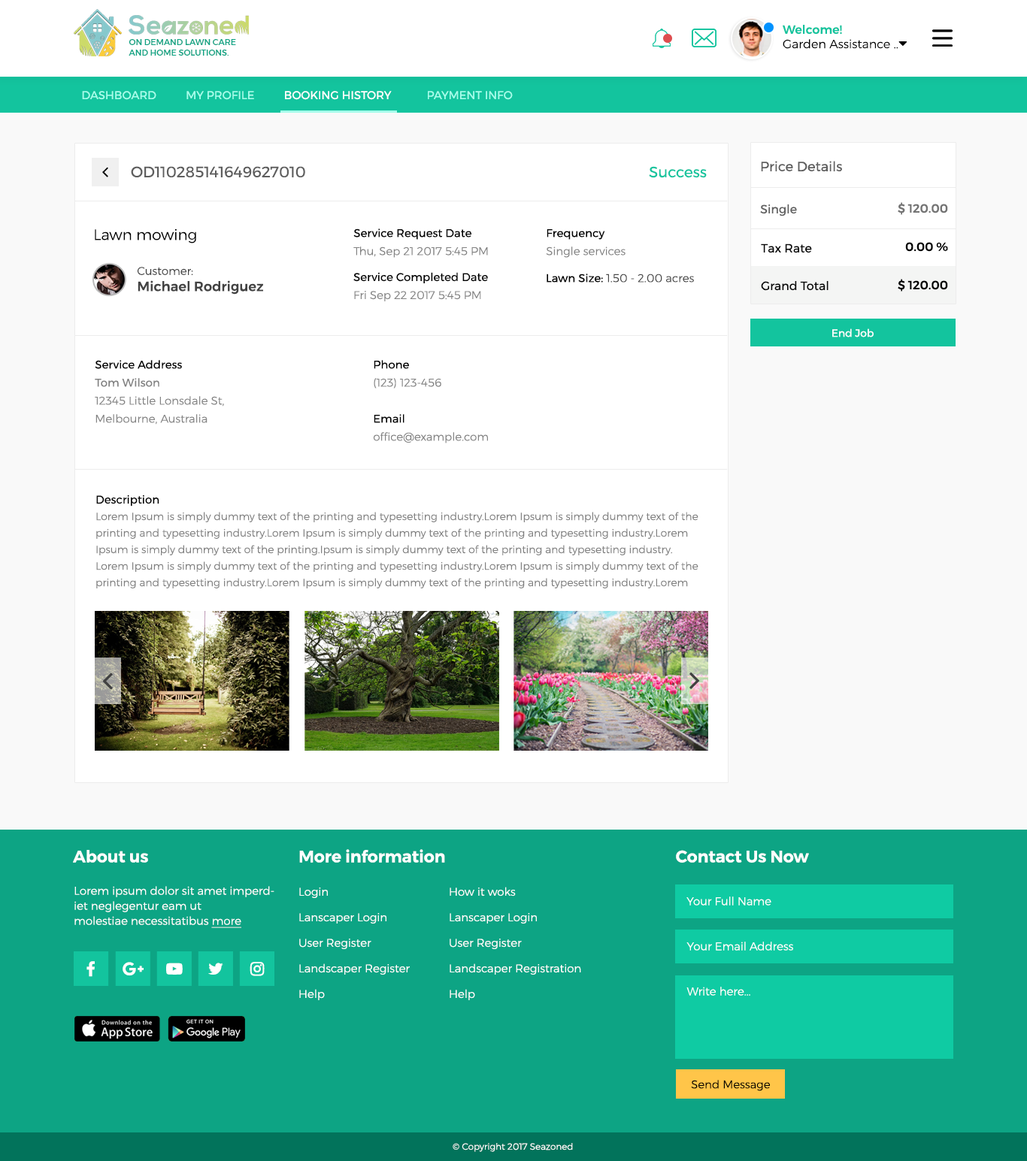
<style>
.page{position:relative;width:1027px;height:1161px;background:#ffffff}
.page>*{position:absolute;margin:0}
.t1{font:12px "Montserrat-Light";color:#000000}
.t2{font:12px "Montserrat-Medium";color:#13c49e}
.t3{font:8.3px "Montserrat-Medium";color:#0da484;text-transform:uppercase}
.t4{font:11.3px "Montserrat-Regular";color:#a6feeb;text-transform:uppercase}
.t5{font:11.3px "Montserrat-Regular";color:#ffffff;text-transform:uppercase}
.t6{font:13.5px "Montserrat-Regular";color:#5e5e5e}
.t7{font:15px "Montserrat-Regular";color:#5e5e5e}
.t8{font:15px "Montserrat-Regular";color:#14c49e}
.t9{font:12px "Montserrat-Regular";color:#5e5e5e}
.t10{font:12px "Montserrat-Medium";color:#747474}
.t11{font:15px "Montserrat-Light";color:#000000}
.t12{font:11.3px/18px "Montserrat-Light";color:#838383}
.t13{font:11.3px/18px "Montserrat-Regular";color:#000000}
.t14{font:12px "Montserrat-Regular";color:#060606}
.t15{font:12px "Montserrat-Medium";color:#000000}
.t16{font:13.5px "Montserrat-Medium";color:#434343}
.t17{font:11.3px "Montserrat-Light";color:#434343}
.t18{font:2.4px "Montserrat-Light";color:#ffffff}
.t19{font:11.3px "Montserrat-Light";color:#474747}
.t20{font:11.3px "Montserrat-Regular";color:#000000}
.t21{font:10.5px "Montserrat-Regular";color:#ffffff}
.t22{font:11.3px/18px "Montserrat-Regular";color:#828282}
.t23{font:10.5px/16.5px "Montserrat-Light";color:#808080}
.t24{font:11.3px/20.3px "Montserrat-Regular";color:#000000}
.t25{font:16.5px "Montserrat-SemiBold";color:#ffffff}
.t26{font:11.3px/15px "Montserrat-Light";color:#ffffff}
.t27{font:11.3px/15px "Montserrat-Light";color:#ffffff;text-decoration:underline}
.t28{font:11.3px/25.6px "Montserrat-Light";color:#ffffff}
.t29{font:11.3px "Montserrat-Light";color:#ffffff}
.t30{font:11.3px "Montserrat-Light";color:#000000}
.t31{font:9px "Montserrat-Light";color:#ffffff}
</style>
<div class="page">
<p class="t1" style="left:782px;top:25px;width:115px;height:24px"><span class="t2">Welcome! <br></span>Garden Assistance ..</p>
<p class="t3" style="left:129px;top:39px;width:107px;height:17px">on demand lawn care <br>and home solutions.</p>
<p class="t4" style="left:82px;top:91px;width:431px;height:9px">DASHBOARD          MY PROFILE          <span class="t5">booking history</span>            payment info</p>
<p class="t6" style="left:761px;top:161px;width:81px;height:10px">Price Details</p>
<p class="t7" style="left:131px;top:166px;width:174px;height:12px">OD110285141649627010</p>
<p class="t8" style="left:649px;top:166px;width:58px;height:12px">Success</p>
<p class="t9" style="left:760px;top:204px;width:37px;height:12px">Single</p>
<p class="t10" style="left:897px;top:202px;width:51px;height:13px">$ 120.00</p>
<p class="t11" style="left:95px;top:229px;width:101px;height:15px">Lawn mowing</p>
<p class="t12" style="left:353px;top:229px;width:135px;height:29px"><span class="t13">Service Request Date<br></span>Thu, Sep 21 2017 5:45 PM</p>
<p class="t12" style="left:546px;top:229px;width:79px;height:29px"><span class="t13">Frequency<br></span>Single services</p>
<p class="t14" style="left:761px;top:244px;width:51px;height:9px">Tax Rate</p>
<p class="t15" style="left:905px;top:242px;width:43px;height:10px">0.00 %</p>
<p class="t16" style="left:137px;top:267px;width:126px;height:28px"><span class="t17">Customer:<br></span>Michael Rodriguez</p>
<p class="t18" style="left:94px;top:278px;width:10px;height:3px">Change</p>
<p class="t12" style="left:353px;top:272px;width:135px;height:29px"><span class="t13">Service Completed Date<br></span>Fri Sep 22 2017 5:45 PM</p>
<p class="t19" style="left:546px;top:274px;width:148px;height:9px"><span class="t20">Lawn Size: </span>1.50 - 2.00 acres</p>
<p class="t14" style="left:761px;top:281px;width:67px;height:10px">Grand Total</p>
<p class="t15" style="left:897px;top:279px;width:51px;height:13px">$ 120.00</p>
<p class="t21" style="left:832px;top:328px;width:41px;height:9px">End Job</p>
<p class="t12" style="left:95px;top:360px;width:129px;height:65px"><span class="t13">Service Address<br></span><span class="t22">Tom Wilson <br></span>12345 Little Lonsdale St, <br>Melbourne, Australia</p>
<p class="t12" style="left:373px;top:360px;width:115px;height:83px"><span class="t13">Phone<br></span>(123) 123-456<br><br><span class="t13">Email<br></span>office@example.com</p>
<p class="t23" style="left:96px;top:495px;width:602px;height:94px"><span class="t24">Description <br></span>Lorem Ipsum is simply dummy text of the printing and typesetting industry.Lorem Ipsum is simply dummy text of the printing and typesetting industry.Lorem Ipsum is simply dummy text of the printing and typesetting industry.Lorem Ipsum is simply dummy text of the printing.Ipsum is simply dummy text of the printing and typesetting industry.<br>Lorem Ipsum is simply dummy text of the printing and typesetting industry.Lorem Ipsum is simply dummy text of the printing and typesetting industry.Lorem Ipsum is simply dummy text of the printing and typesetting industry.Lorem Ipsum is simply dummy text of the printing.Ipsum is simply dummy text of the printing and typesetting industry.</p>
<p class="t25" style="left:73px;top:850px;width:75px;height:13px">About us</p>
<p class="t25" style="left:299px;top:849px;width:146px;height:14px">More information</p>
<p class="t25" style="left:676px;top:850px;width:133px;height:13px">Contact Us Now</p>
<p class="t26" style="left:74px;top:886px;width:200px;height:42px">Lorem ipsum dolor sit amet imperdiet neglegentur eam ut<br>molestiae necessitatibus <span class="t27">more</span></p>
<p class="t28" style="left:299px;top:888px;width:111px;height:112px">Login<br>Lanscaper Login<br>User Register<br>Landscaper Register<br>Help</p>
<p class="t28" style="left:449px;top:887px;width:132px;height:113px">How it woks<br>Lanscaper Login<br>User Register<br>Landscaper Registration<br>Help</p>
<p class="t29" style="left:686px;top:897px;width:85px;height:9px">Your Full Name</p>
<p class="t29" style="left:686px;top:942px;width:107px;height:9px">Your Email Address</p>
<p class="t29" style="left:686px;top:987px;width:64px;height:9px">Write here...</p>
<p class="t30" style="left:691px;top:1080px;width:79px;height:11px">Send Message</p>
<p class="t31" style="left:453px;top:1143px;width:120px;height:9px">© Copyright 2017 Seazoned</p>
</div>
